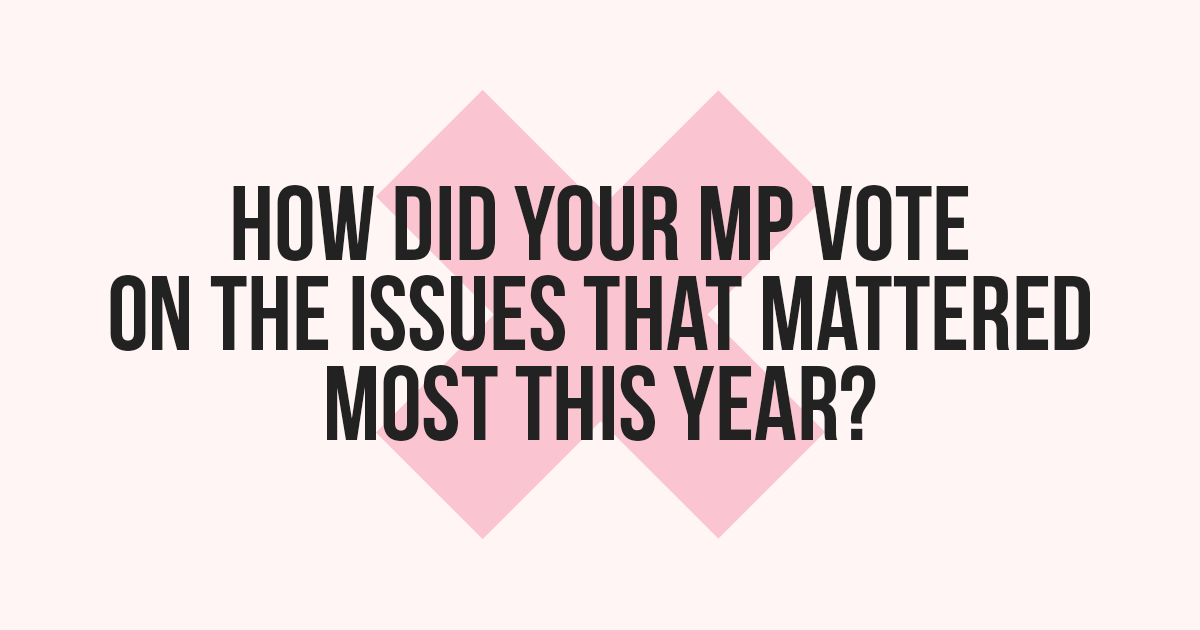
<style>
.page{position:relative;width:1200px;height:630px;background:#fff5f5}
.page>*{position:absolute;margin:0}
.t1{font:105.6px/90px "BebasNeueBold";color:#222222}
</style>
<div class="page">
<p class="t1" style="left:110px;top:185px;width:980px;height:256px;text-align:center">How did your MP vote<br>on the issues that mattered<br>most this year?</p>
</div>
